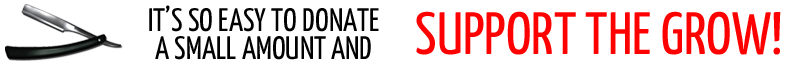
<style>
.page{position:relative;width:787px;height:67px;background:#ffffff}
.page>*{position:absolute;margin:0}
.t1{font:32.3px/28.1px "YanoneKaffeesatz-Regular";color:#000000;text-transform:uppercase}
.t2{font:59.8px "YanoneKaffeesatz-Regular";color:#ff0000;text-transform:uppercase}
</style>
<div class="page">
<p class="t1" style="left:149px;top:5px;width:230px;height:55px;text-align:center">It’s so easy to donate<br>a small amount and</p>
<p class="t2" style="left:416px;top:11px;width:365px;height:44px">support the grow!</p>
</div>
